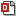
<style>
.page{position:relative;width:16px;height:16px;background:#ffffff}
.page>*{position:absolute;margin:0}
.t1{font:7px "Myriad-Bold";color:#ffffff;scale:0.9 1}
</style>
<div class="page">
<p class="t1" style="left:3px;top:5px;width:4px;height:5px">D</p>
</div>
